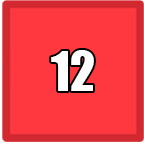
<style>
.page{position:relative;width:144px;height:142px;background:#ff3840}
.page>*{position:absolute;margin:0}
.t1{font:50px "Impact";color:#ffffff}
</style>
<div class="page">
<p class="t1" style="left:51px;top:50px;width:43px;height:41px">12</p>
</div>
